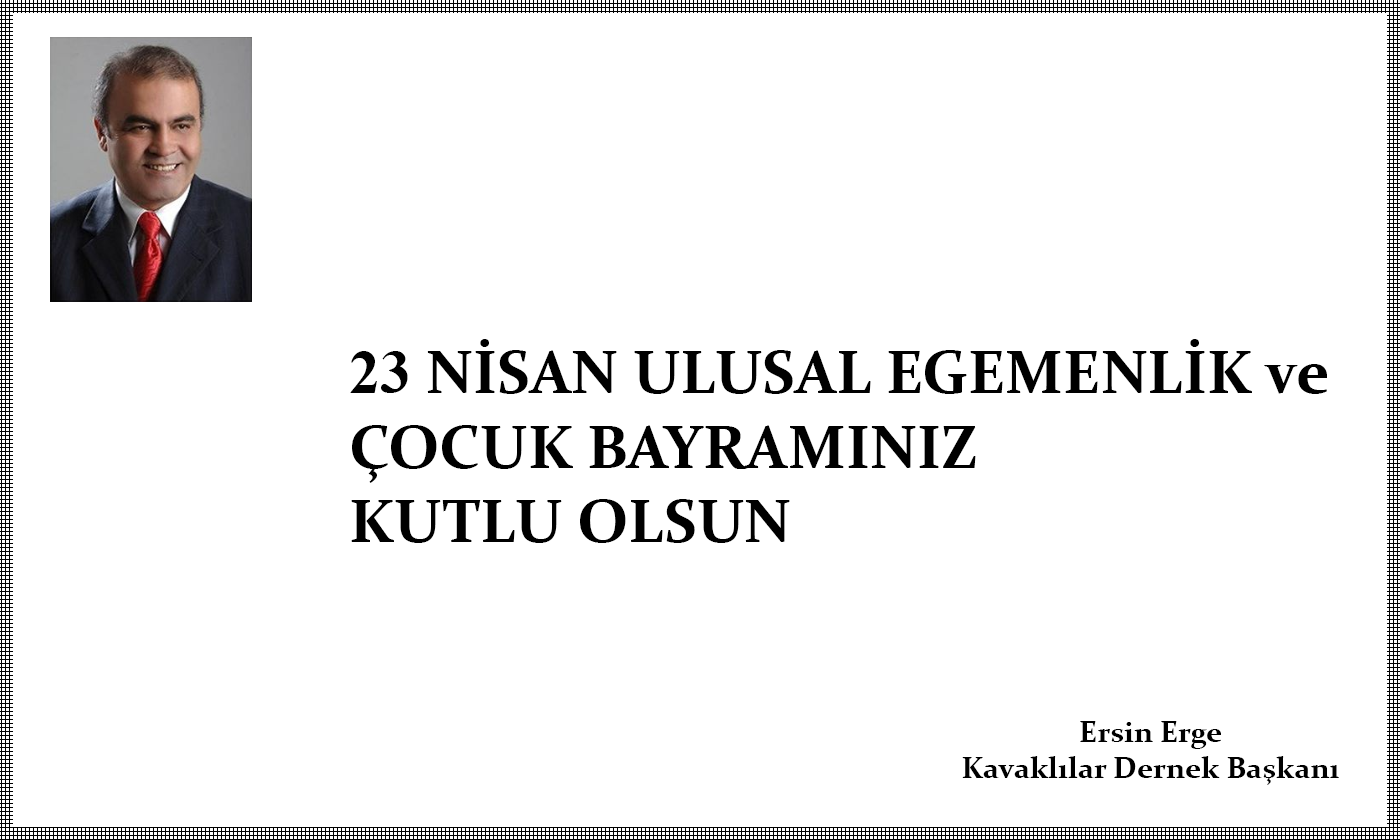
<style>
.page{position:relative;width:1400px;height:840px;background:#ffffff}
.page>*{position:absolute;margin:0}
.t1{font:62px "Constantia-Bold";color:#000000}
.t2{font:62px "TimesNewRomanPS-BoldMT";color:#000000}
.t3{font:30px "Constantia-Bold";color:#000000}
</style>
<div class="page">
<p class="t1" style="left:350px;top:339px;width:977px;height:204px"><span class="t2">23</span> NİSAN ULUSAL EGEMENLİK ve <br>ÇOCUK BAYRAMINIZ<br>KUTLU OLSUN</p>
<p class="t3" style="left:962px;top:721px;width:377px;height:64px;text-align:center">Ersin Erge<br>Kavaklılar Dernek Başkanı</p>
</div>
